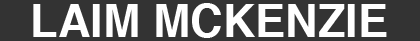
<style>
.page{position:relative;width:420px;height:41px;background:#333333}
.page>*{position:absolute;margin:0}
.t1{font:45.2px "Helvetica-Bold";color:#ffffff}
</style>
<div class="page">
<p class="t1" style="left:33px;top:3px;width:354px;height:35px">LAIM MCKENZIE</p>
</div>
